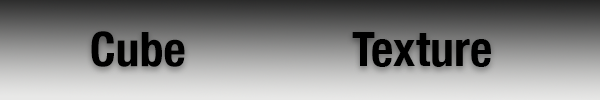
<style>
.page{position:relative;width:600px;height:100px}
.page>*{position:absolute;margin:0}
.t1{font:48px "HelveticaNeue-CondensedBold";color:#000000}
</style>
<div class="page">
<p class="t1" style="left:91px;top:31px;width:94px;height:36px">Cube</p>
<p class="t1" style="left:352px;top:32px;width:139px;height:35px">Texture</p>
</div>
